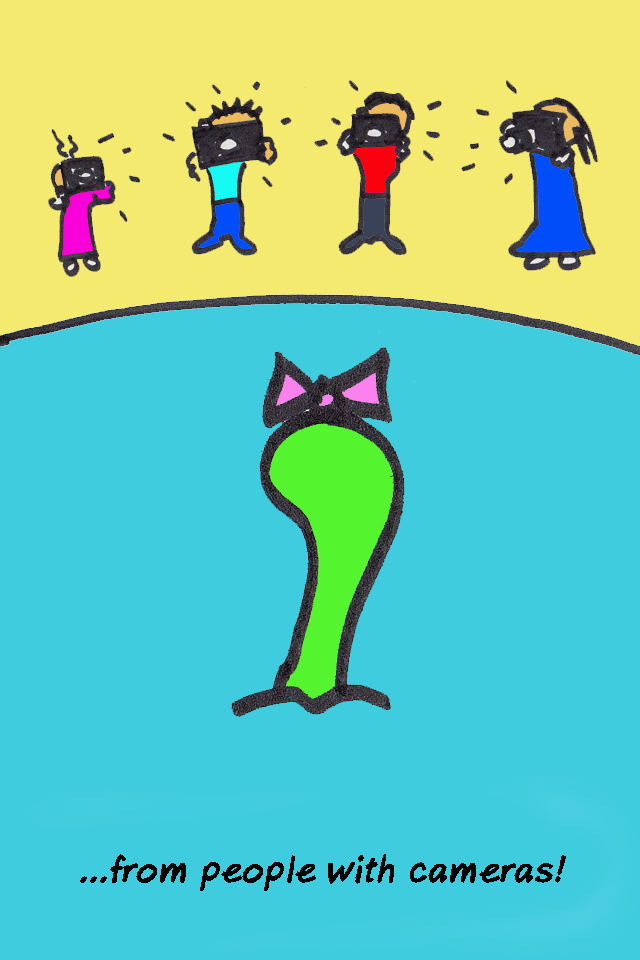
<style>
.page{position:relative;width:640px;height:960px;background:#40ccdf}
.page>*{position:absolute;margin:0}
.t1{font:36px "AxureHandwriting-BoldItalic";color:#000000}
</style>
<div class="page">
<p class="t1" style="left:80px;top:854px;width:486px;height:37px">...from people with cameras!</p>
</div>
